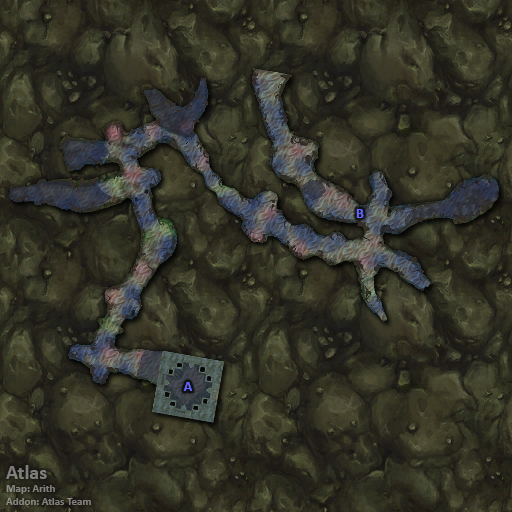
<style>
.page{position:relative;width:512px;height:512px}
.page>*{position:absolute;margin:0}
.t1{font:14px "Calibri-Bold";color:#6666ff}
.t2{font:11px "Calibri-Bold";color:#7f7f7c}
.t3{font:20px "Calibri-Bold";color:#7f7f7c}
</style>
<div class="page">
<p class="t1" style="left:356px;top:209px;width:8px;height:9px">B</p>
<p class="t1" style="left:183px;top:382px;width:9px;height:9px">A</p>
<p class="t2" style="left:6px;top:465px;width:85px;height:40px"><span class="t3">Atlas<br></span>Map: Arith<br>Addon: Atlas Team</p>
</div>
